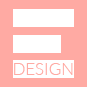
<style>
.page{position:relative;width:87px;height:87px;background:#ffaaa3}
.page>*{position:absolute;margin:0}
.t1{font:16.7px "Lato-Light";color:#ffaaa3}
</style>
<div class="page">
<p class="t1" style="left:14px;top:63px;width:59px;height:12px">DESIGN</p>
</div>
